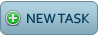
<style>
.page{position:relative;width:98px;height:36px}
.page>*{position:absolute;margin:0}
.t1{font:14px "Corbel";color:#043d57}
</style>
<div class="page">
<p class="t1" style="left:27px;top:13px;width:63px;height:11px">NEW TASK</p>
</div>
